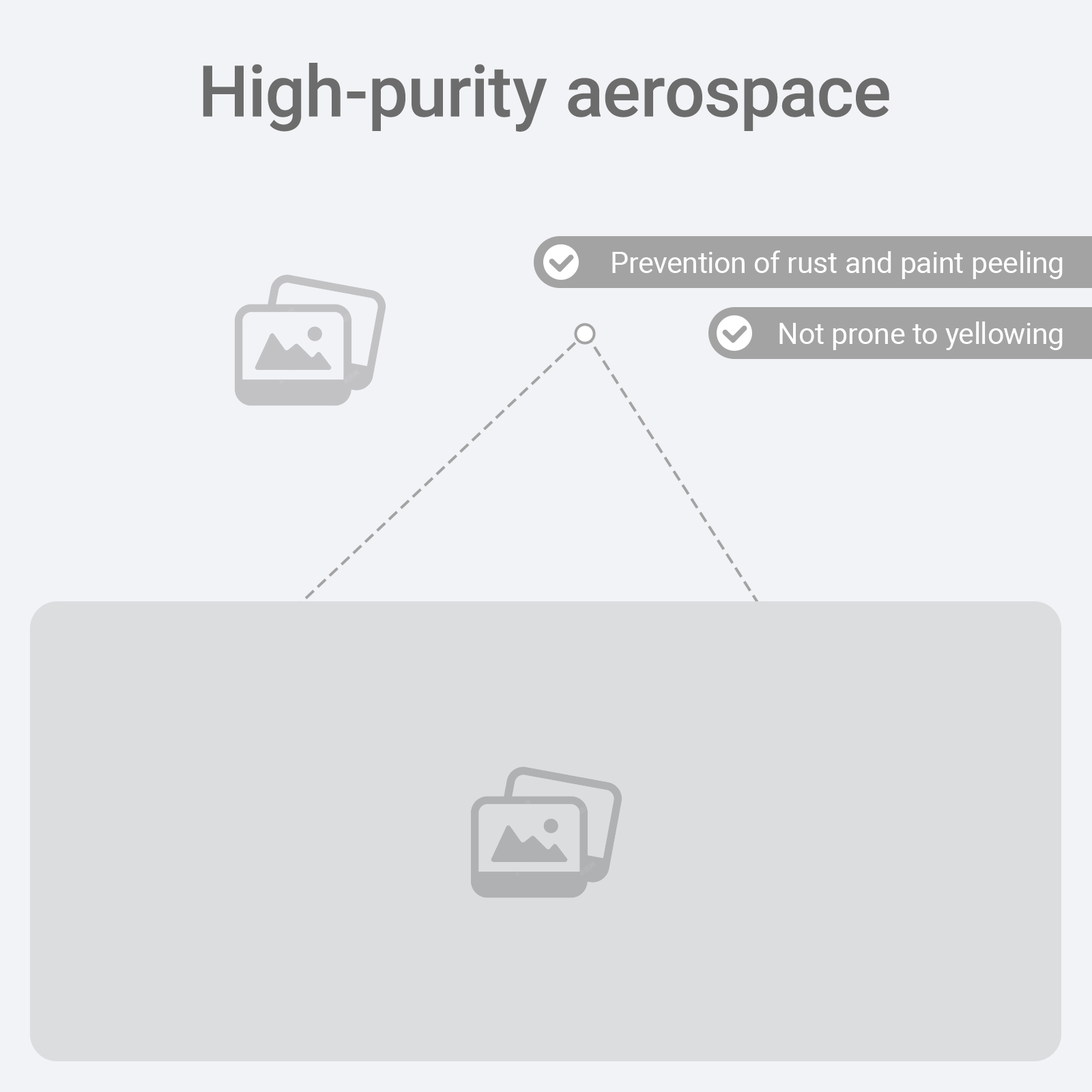
<style>
.page{position:relative;width:1092px;height:1092px;background:#f2f3f6}
.page>*{position:absolute;margin:0}
.t1{font:71.3px "Roboto-Medium";color:#6c6c6c}
.t2{font:29.1px "Roboto-Regular";color:#ffffff}
</style>
<div class="page">
<p class="t1" style="left:203px;top:63px;width:686px;height:69px">High-purity aerospace</p>
<p class="t2" style="left:612px;top:250px;width:451px;height:29px">Prevention of rust and paint peeling</p>
<p class="t2" style="left:779px;top:321px;width:284px;height:29px">Not prone to yellowing</p>
</div>
